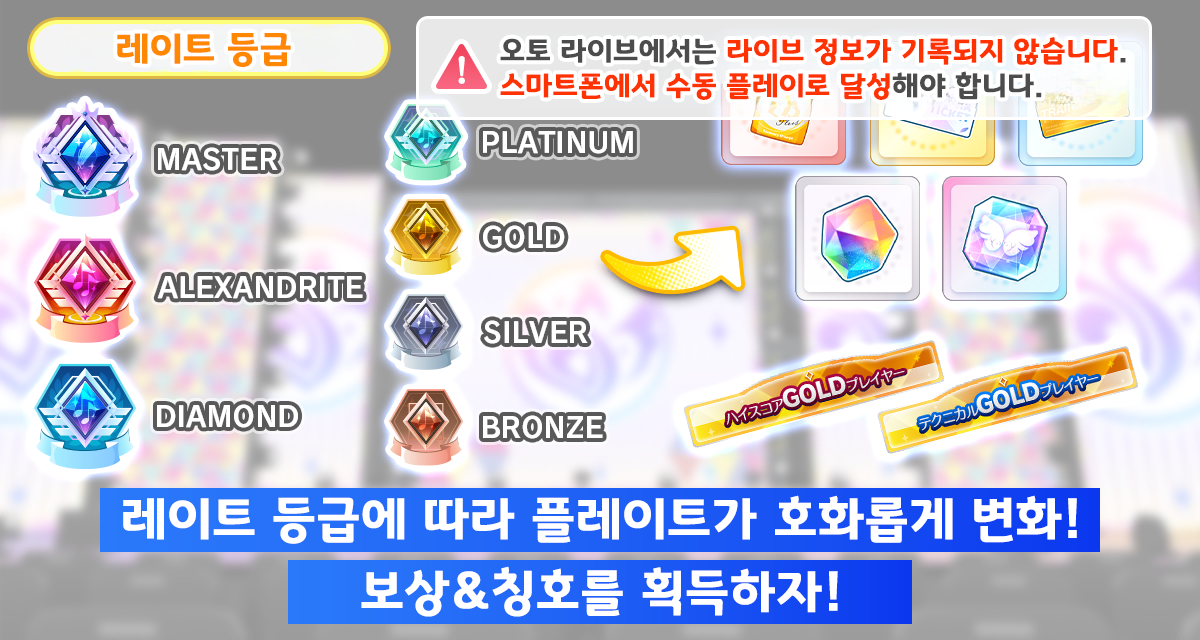
<style>
.page{position:relative;width:1200px;height:640px}
.page>*{position:absolute;margin:0}
.t1{font:37.3px "GyeonggiTitleB";letter-spacing:0.03em;color:#ff8702}
.t2{font:29.3px/34.7px "GyeonggiTitleB";letter-spacing:0.03em;color:#ff3301}
.t3{font:29.3px/34.7px "GyeonggiTitleB";letter-spacing:0.03em;color:#4c4c4c}
.t4{font:50.7px "GyeonggiTitleB";letter-spacing:0.03em;color:#ffffff}
</style>
<div class="page">
<p class="t1" style="left:117px;top:33px;width:174px;height:34px">레이트 등급</p>
<p class="t2" style="left:500px;top:37px;width:626px;height:63px"><span class="t3">오토 라이브에서는 </span>라이브 정보가 기록되지 않습니다<span class="t3">.<br></span>스마트폰에서 수동 플레이로 달성<span class="t3">해야 합니다.</span></p>
<p class="t4" style="left:123px;top:495px;width:954px;height:49px">레이트 등급에 따라 플레이트가 호화롭게 변화!</p>
<p class="t4" style="left:361px;top:566px;width:477px;height:51px">보상&amp;칭호를 획득하자!</p>
</div>
